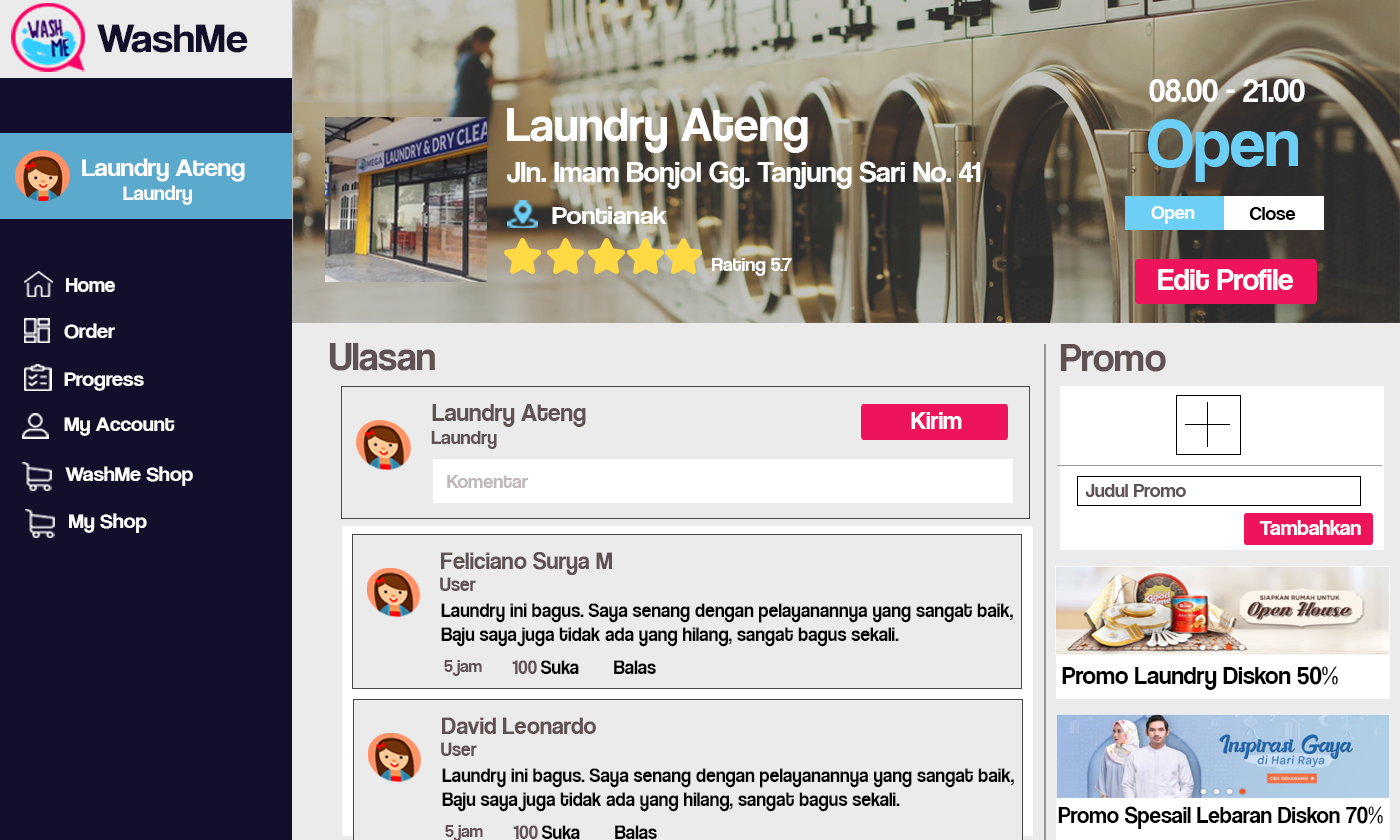
<style>
.page{position:relative;width:1400px;height:840px;background:#ebebeb}
.page>*{position:absolute;margin:0}
.t1{font:42.1px "CoolveticaRg-Regular";color:#120f2b;scale:1.05 1}
.t2{font:33px "CoolveticaRg-Regular";color:#ffffff}
.t3{font:48.8px "CoolveticaRg-Regular";color:#ffffff}
.t4{font:70.4px "CoolveticaRg-Regular";color:#6dcff6}
.t5{font:25.2px "CoolveticaRg-Regular";color:#ffffff;scale:1.05 1}
.t6{font:20px "CoolveticaRg-Regular";color:#ffffff;scale:1.05 1}
.t7{font:30px "CoolveticaRg-Regular";color:#ffffff}
.t8{font:25.6px "CoolveticaRg-Regular";color:#ffffff;scale:1.08 1}
.t9{font:20px "CoolveticaRg-Regular";color:#ffffff}
.t10{font:20px "CoolveticaRg-Regular";color:#000000}
.t11{font:31.2px "CoolveticaRg-Regular";color:#ffffff}
.t12{font:21px "CoolveticaRg-Regular";color:#ffffff}
.t13{font:21px "CoolveticaRg-Regular";color:#ffffff;scale:1.05 1}
.t14{font:40px "CoolveticaRg-Regular";color:#605252}
.t15{font:25px "CoolveticaRg-Regular";color:#605252}
.t16{font:25px "CoolveticaRg-Regular";color:#ffffff}
.t17{font:20px "CoolveticaRg-Regular";color:#605252}
.t18{font:20px "CoolveticaRg-Regular";color:#bfb9b9}
.t19{font:22.2px "CoolveticaRg-Regular";color:#ffffff}
.t20{font:24.7px "CoolveticaRg-Regular";color:#605252}
.t21{font:19.7px "CoolveticaRg-Regular";color:#605252}
.t22{font:19.7px "CoolveticaRg-Regular";color:#000000}
.t23{font:17.8px "CoolveticaRg-Regular";color:#605252}
.t24{font:25px "CoolveticaRg-Regular";color:#000000}
.t25{font:23px "CoolveticaRg-Regular";color:#000000}
</style>
<div class="page">
<p class="t1" style="left:97px;top:24px;width:151px;height:29px">WashMe</p>
<p class="t2" style="left:1149px;top:79px;width:156px;height:23px">08.00 - 21.00</p>
<p class="t3" style="left:507px;top:108px;width:301px;height:45px">Laundry Ateng</p>
<p class="t4" style="left:1148px;top:119px;width:150px;height:63px">Open</p>
<p class="t5" style="left:82px;top:158px;width:163px;height:47px">Laundry Ateng<br><span class="t6">        Laundry</span></p>
<p class="t7" style="left:507px;top:161px;width:474px;height:28px">Jln. Imam Bonjol Gg. Tanjung Sari No. 41</p>
<p class="t8" style="left:552px;top:206px;width:115px;height:18px">Pontianak</p>
<p class="t9" style="left:1151px;top:206px;width:44px;height:18px">Open</p>
<p class="t10" style="left:1249px;top:207px;width:47px;height:13px">Close</p>
<p class="t9" style="left:712px;top:258px;width:80px;height:18px">Rating 5.7</p>
<p class="t11" style="left:1158px;top:269px;width:135px;height:21px">Edit Profile</p>
<p class="t12" style="left:66px;top:278px;width:49px;height:14px">Home</p>
<p class="t13" style="left:64px;top:323px;width:51px;height:16px">Order</p>
<p class="t14" style="left:329px;top:343px;width:106px;height:28px">Ulasan</p>
<p class="t14" style="left:1060px;top:344px;width:106px;height:28px">Promo</p>
<p class="t13" style="left:64px;top:372px;width:80px;height:19px">Progress</p>
<p class="t15" style="left:432px;top:404px;width:154px;height:23px">Laundry Ateng</p>
<p class="t16" style="left:911px;top:412px;width:51px;height:17px">Kirim</p>
<p class="t13" style="left:64px;top:417px;width:111px;height:19px">My Account</p>
<p class="t17" style="left:431px;top:431px;width:66px;height:18px">Laundry</p>
<p class="t13" style="left:65px;top:466px;width:128px;height:20px">WashMe Shop</p>
<p class="t18" style="left:447px;top:475px;width:81px;height:13px">Komentar</p>
<p class="t17" style="left:1085px;top:484px;width:101px;height:13px">Judul Promo</p>
<p class="t13" style="left:69px;top:513px;width:78px;height:20px">My Shop</p>
<p class="t19" style="left:1259px;top:520px;width:102px;height:15px">Tambahkan</p>
<p class="t20" style="left:441px;top:552px;width:171px;height:24px">Feliciano Surya M</p>
<p class="t21" style="left:440px;top:577px;width:36px;height:14px">User</p>
<p class="t22" style="left:441px;top:603px;width:572px;height:44px">Laundry ini bagus. Saya senang dengan pelayanannya yang sangat baik,<br>Baju saya juga tidak ada yang hilang, sangat bagus sekali.</p>
<p class="t23" style="left:444px;top:660px;width:38px;height:16px">5 jam</p>
<p class="t21" style="left:512px;top:660px;width:25px;height:14px">100</p>
<p class="t22" style="left:540px;top:660px;width:39px;height:14px">Suka</p>
<p class="t22" style="left:614px;top:660px;width:42px;height:14px">Balas</p>
<p class="t24" style="left:1062px;top:666px;width:276px;height:24px">Promo Laundry Diskon 50%</p>
<p class="t20" style="left:442px;top:717px;width:154px;height:17px">David Leonardo</p>
<p class="t21" style="left:441px;top:742px;width:36px;height:14px">User</p>
<p class="t22" style="left:442px;top:768px;width:572px;height:44px">Laundry ini bagus. Saya senang dengan pelayanannya yang sangat baik,<br>Baju saya juga tidak ada yang hilang, sangat bagus sekali.</p>
<p class="t25" style="left:1058px;top:806px;width:325px;height:23px">Promo Spesail Lebaran Diskon 70%</p>
<p class="t23" style="left:445px;top:825px;width:38px;height:16px">5 jam</p>
<p class="t21" style="left:513px;top:825px;width:25px;height:14px">100</p>
<p class="t22" style="left:541px;top:825px;width:39px;height:14px">Suka</p>
<p class="t22" style="left:615px;top:825px;width:42px;height:14px">Balas</p>
</div>
